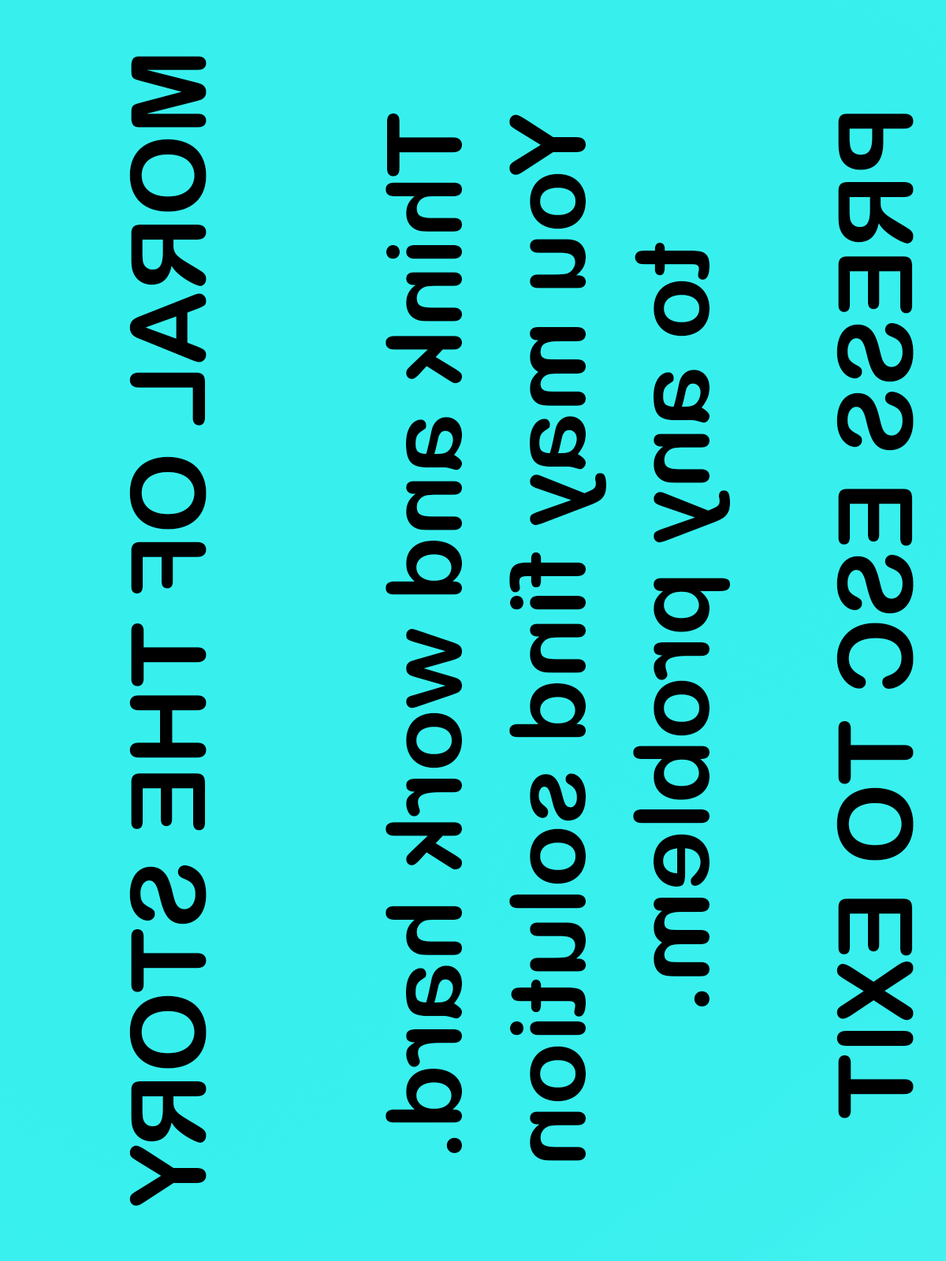
<style>
.page{position:relative;width:946px;height:1261px;background:#37f0ee}
.page>*{position:absolute;margin:0}
.t1{font:103.1px "ArialRoundedMTBold";color:#000000}
</style>
<div class="page">
<p class="t1" style="left:129px;top:56px;width:77px;height:1150px;rotate:90deg">MORAL OF THE STORY</p>
<p class="t1" style="left:385px;top:113px;width:345px;height:1048px;rotate:90deg">Think and work hard.<br>You may find solution<br>     to any problem.</p>
<p class="t1" style="left:836px;top:113px;width:77px;height:1005px;rotate:90deg">PRESS ESC TO EXIT</p>
</div>
